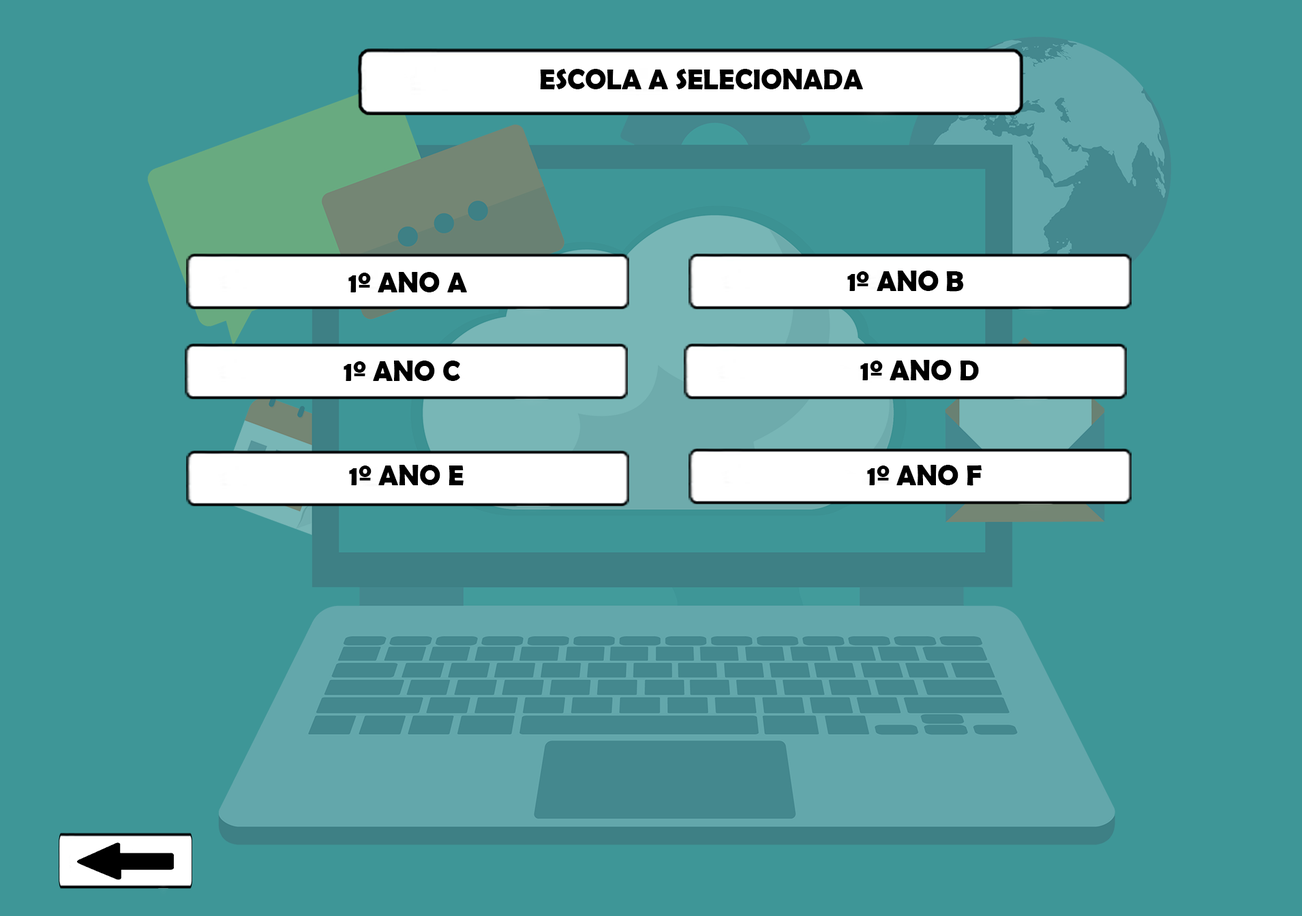
<style>
.page{position:relative;width:1302px;height:916px;background:#3e9697}
.page>*{position:absolute;margin:0}
.t1{font:28.4px "BerlinSansFBDemi-Bold";color:#000000}
</style>
<div class="page">
<p class="t1" style="left:348px;top:272px;width:119px;height:20px">1º ANO A</p>
<p class="t1" style="left:847px;top:271px;width:117px;height:21px">1º ANO B</p>
<p class="t1" style="left:344px;top:361px;width:116px;height:20px">1º ANO C</p>
<p class="t1" style="left:860px;top:360px;width:119px;height:20px">1º ANO D</p>
<p class="t1" style="left:349px;top:465px;width:114px;height:21px">1º ANO E</p>
<p class="t1" style="left:867px;top:465px;width:115px;height:21px">1º ANO F</p>
</div>
